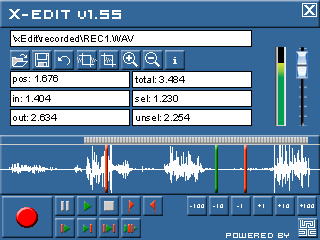
<style>
.page{position:relative;width:320px;height:240px;background:#336699}
.page>*{position:absolute;margin:0}
.t1{font:10px "ArialMT";color:#000000}
</style>
<div class="page">
<p class="t1" style="left:13px;top:35px;width:121px;height:7px">\xEdit\recorded\REC1.WAV</p>
<p class="t1" style="left:13px;top:75px;width:45px;height:9px">pos: 1.676</p>
<p class="t1" style="left:135px;top:76px;width:50px;height:7px">total: 3.484</p>
<p class="t1" style="left:13px;top:95px;width:38px;height:7px">in: 1.404</p>
<p class="t1" style="left:135px;top:95px;width:43px;height:7px">sel: 1.230</p>
<p class="t1" style="left:13px;top:114px;width:44px;height:7px">out: 2.634</p>
<p class="t1" style="left:136px;top:114px;width:54px;height:7px">unsel: 2.254</p>
</div>
